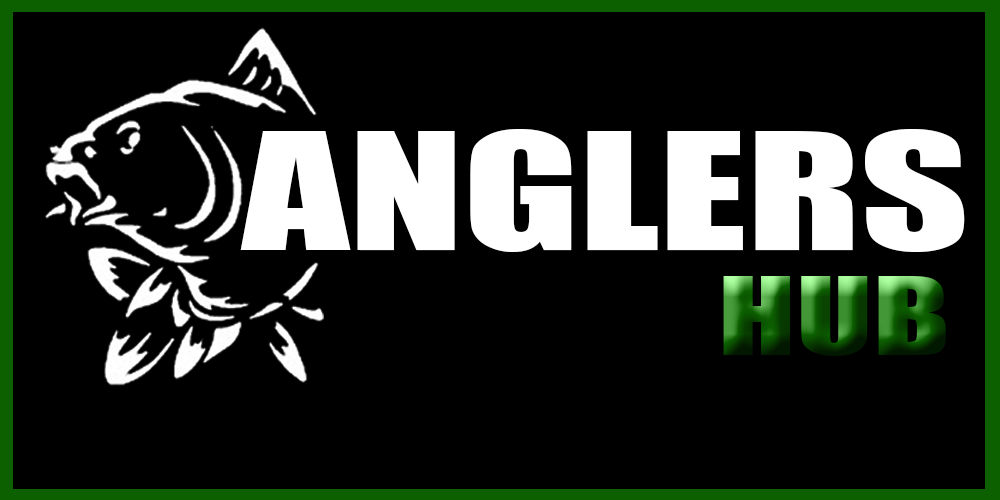
<style>
.page{position:relative;width:1000px;height:500px;background:#000000}
.page>*{position:absolute;margin:0}
.t1{font:150px "Impact";color:#ffffff;scale:1.4 1}
.t2{font:100px "Impact";scale:1.4 1}
</style>
<div class="page">
<p class="t1" style="left:240px;top:129px;width:725px;height:123px">ANGLERS</p>
<p class="t2" style="left:723px;top:276px;width:223px;height:80px">HUB</p>
</div>
